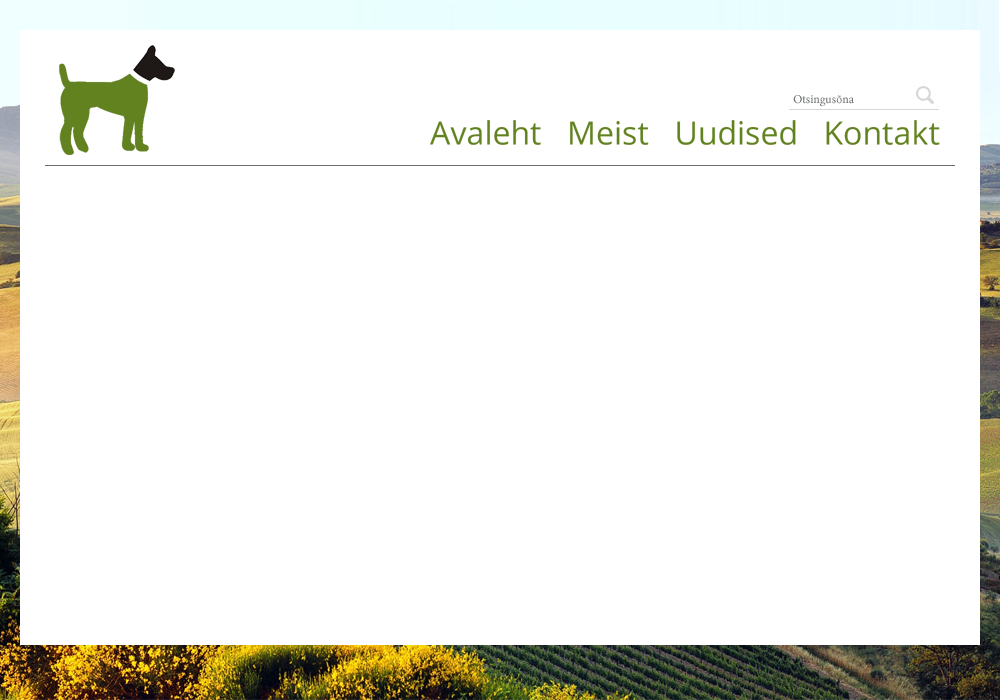
<style>
.page{position:relative;width:1000px;height:700px;background:#ffffff}
.page>*{position:absolute;margin:0}
.t1{font:12px "MinionPro-Regular";color:#696b6c}
.t2{font:32px "OpenSans";color:#61821f}
</style>
<div class="page">
<p class="t1" style="left:793px;top:95px;width:61px;height:12px">Otsingusõna</p>
<p class="t2" style="left:430px;top:120px;width:510px;height:25px">Avaleht   Meist   Uudised   Kontakt</p>
</div>
